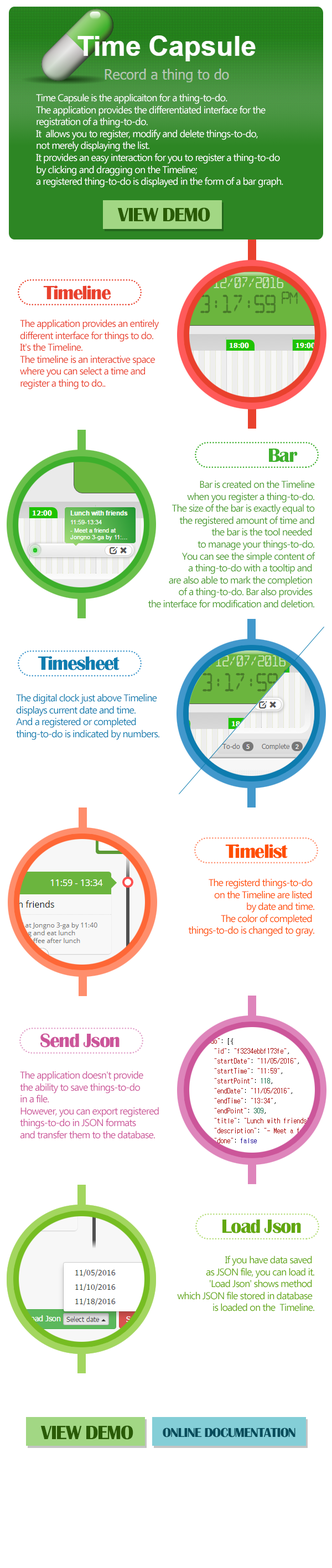
<style>
.page{position:relative;width:332px;height:1568px;background:#ffffff}
.page>*{position:absolute;margin:0}
.t1{font:10px "Ebrima";letter-spacing:-0.05em;color:#ffffff}
.t2{font:19.9px "BritannicBold";letter-spacing:-0.05em;color:#295b06}
.t3{font:19.9px "BritannicBold";letter-spacing:-0.05em;color:#e9412d}
.t4{font:10px "Ebrima";letter-spacing:-0.05em;color:#e9412d}
.t5{font:19.9px "BritannicBold";letter-spacing:-0.05em;color:#3daf2c}
.t6{font:10px "Ebrima";letter-spacing:-0.05em;color:#4c9d2f}
.t7{font:19.9px "BritannicBold";letter-spacing:-0.05em;color:#0d7caf}
.t8{font:10px "Ebrima";letter-spacing:-0.05em;color:#0d7caf}
.t9{font:19.9px "BritannicBold";letter-spacing:-0.05em;color:#ff4e00}
.t10{font:10px "Ebrima";letter-spacing:-0.05em;color:#ff4e00}
.t11{font:19.9px "BritannicBold";letter-spacing:-0.05em;color:#cc569a}
.t12{font:10px "Ebrima";letter-spacing:-0.05em;color:#cc569a}
.t13{font:19.9px "BritannicBold";letter-spacing:-0.05em;color:#62a70f}
.t14{font:10px "Ebrima";letter-spacing:-0.05em;color:#62a70f}
.t15{font:13.3px "BritannicBold";letter-spacing:-0.05em;color:#064c5b}
</style>
<div class="page">
<p class="t1" style="left:36px;top:93px;width:247px;height:94px">Time Capsule is the applicaiton for a thing-to-do.<br>The application provides the differentiated interface for the <br>registration of a thing-to-do.<br>It  allows you to register, modify and delete things-to-do, <br>not merely displaying the list. <br>It provides an easy interaction for you to register a thing-to-do <br>by clicking and dragging on the Timeline; <br>a registered thing-to-do is displayed in the form of a bar graph.</p>
<p class="t2" style="left:117px;top:207px;width:93px;height:15px">VIEW DEMO</p>
<p class="t3" style="left:43px;top:285px;width:68px;height:15px">Timeline</p>
<p class="t4" style="left:20px;top:319px;width:139px;height:70px">The application provides an entirely <br>different interface for things to do.<br>It's the Timeline. <br>The timeline is an interactive space <br>where you can select a time and <br>register a thing to do..</p>
<p class="t5" style="left:269px;top:449px;width:29px;height:13px">Bar</p>
<p class="t6" style="left:148px;top:480px;width:167px;height:128px;text-align:right">Bar is created on the Timeline<br>when you register a thing-to-do.<br>The size of the bar is exactly equal to<br>the registered amount of time and<br>the bar is the tool needed <br>to manage your things-to-do.<br>You can see the simple content of<br>a thing-to-do with a tooltip and <br>are also able to mark the completion <br>of a thing-to-do. Bar also provides <br>the interface for modification and deletion.</p>
<p class="t7" style="left:38px;top:656px;width:81px;height:14px">Timesheet</p>
<p class="t8" style="left:16px;top:694px;width:143px;height:46px">The digital clock just above Timeline <br>displays current date and time.<br>And a registered or completed <br>thing-to-do is indicated by numbers.</p>
<p class="t9" style="left:225px;top:844px;width:63px;height:14px">Timelist</p>
<p class="t10" style="left:188px;top:878px;width:126px;height:58px;text-align:right">The registerd things-to-do <br>on the Timeline are listed <br>by date and time.<br>The color of completed <br>things-to-do is changed to gray.</p>
<p class="t11" style="left:40px;top:1033px;width:79px;height:15px">Send Json</p>
<p class="t12" style="left:20px;top:1071px;width:139px;height:68px">The application doesn't provide <br>the ability to save things-to-do <br>in a file.<br>However, you can export registered<br>things-to-do in JSON formats <br>and transfer them to the database.</p>
<p class="t13" style="left:222px;top:1219px;width:79px;height:14px">Load Json</p>
<p class="t14" style="left:177px;top:1256px;width:137px;height:55px;text-align:right">If you have data saved <br>as JSON file, you can load it.<br>'Load Json' shows method <br>which JSON file stored in database <br>is loaded on the  Timeline.</p>
<p class="t2" style="left:40px;top:1425px;width:93px;height:15px">VIEW DEMO</p>
<p class="t15" style="left:163px;top:1428px;width:132px;height:9px">ONLINE DOCUMENTATION</p>
</div>
